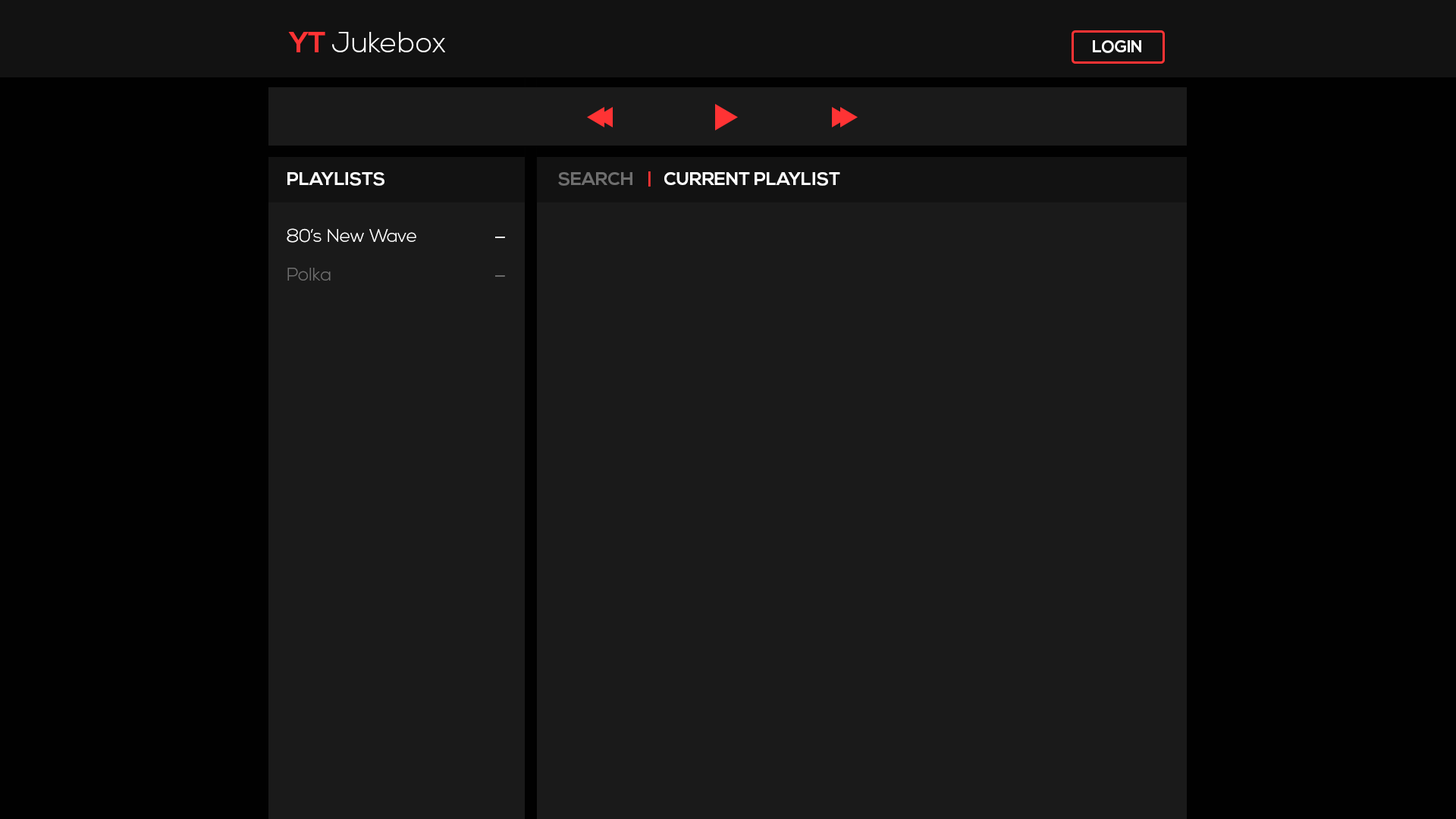
<style>
.page{position:relative;width:1456px;height:819px;background:#1a1a1a}
.page>*{position:absolute;margin:0}
.t1{font:28.8px "NexaLight";color:#ffffff}
.t2{font:28.8px "NexaBold";color:#ff3334}
.t3{font:16.7px "NexaBold";color:#ffffff}
.t4{font:18.2px "NexaBold";color:#ffffff}
.t5{font:18.2px "NexaBold";color:#6e6e6e}
.t6{font:18.2px "NexaBold";color:#ff3334}
.t7{font:18.2px "NexaLight";color:#ffffff}
.t8{font:27.3px "NexaLight";color:#ffffff}
.t9{font:18.2px "NexaLight";color:#6e6e6e}
.t10{font:27.3px "NexaLight";color:#6e6e6e}
</style>
<div class="page">
<p class="t1" style="left:288px;top:32px;width:157px;height:20px"><span class="t2">YT </span>Jukebox</p>
<p class="t3" style="left:1093px;top:40px;width:48px;height:13px">LOGIN</p>
<p class="t4" style="left:287px;top:172px;width:97px;height:14px">PLAYLISTS</p>
<p class="t5" style="left:558px;top:172px;width:74px;height:14px">SEARCH</p>
<p class="t6" style="left:648px;top:171px;width:3px;height:16px">|</p>
<p class="t4" style="left:664px;top:172px;width:176px;height:14px">CURRENT PLAYLIST</p>
<p class="t7" style="left:287px;top:228px;width:129px;height:15px">80’s New Wave</p>
<p class="t8" style="left:495px;top:237px;width:10px;height:1px">-</p>
<p class="t9" style="left:287px;top:268px;width:44px;height:13px">Polka</p>
<p class="t10" style="left:495px;top:275px;width:10px;height:2px">-</p>
</div>
